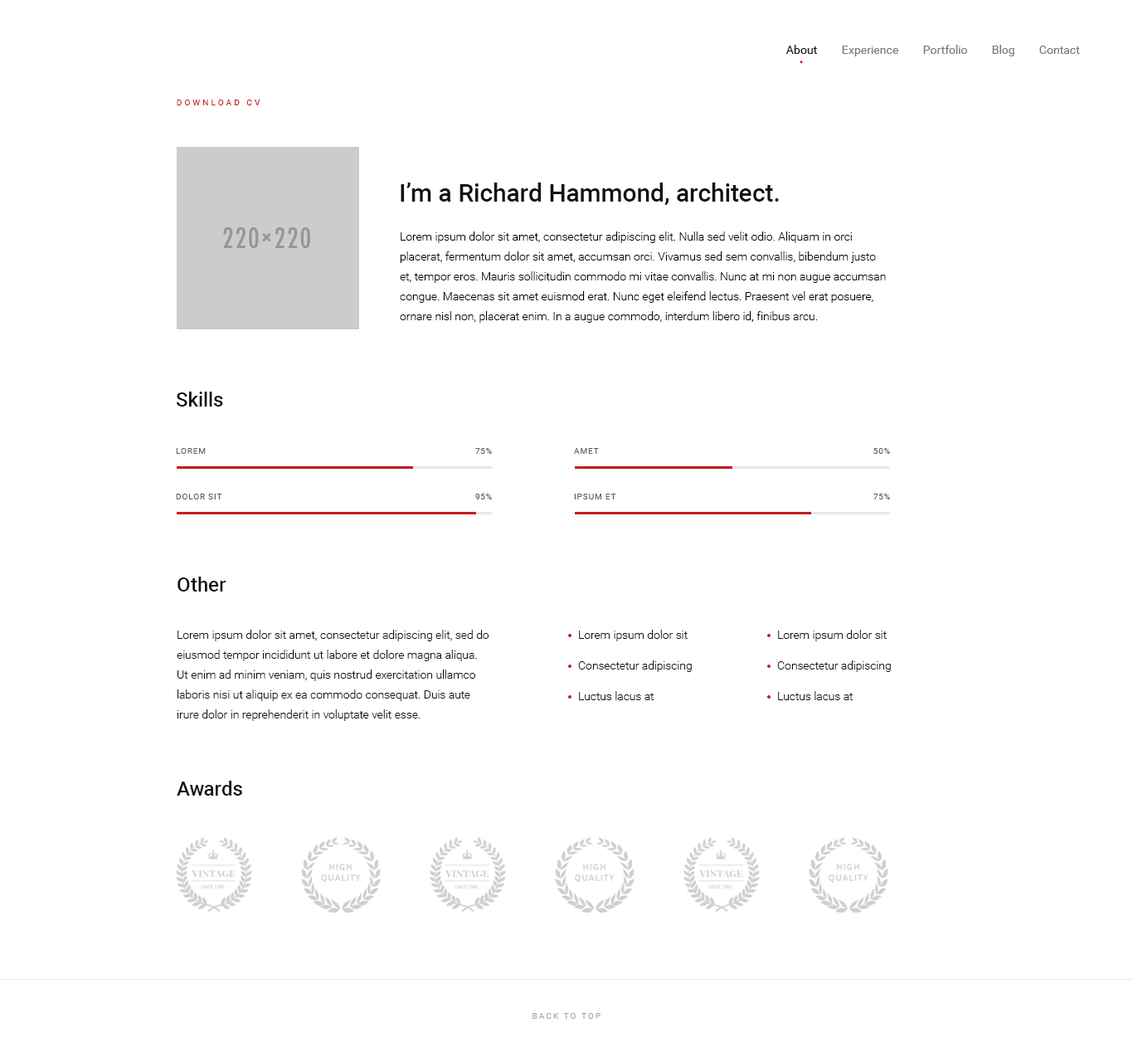
<style>
.page{position:relative;width:1133px;height:1052px;background:#ffffff}
.page>*{position:absolute;margin:0}
.t1{font:11.6px "Roboto-Regular";color:#111111}
.t2{font:11.6px "Roboto-Regular";color:#797979}
.t3{font:8.3px "Roboto-Regular";letter-spacing:0.3em;color:#c51d1d;text-transform:uppercase}
.t4{font:24.9px "Roboto-Medium";color:#111111}
.t5{font:11.6px/19.9px "Roboto-Light";color:#000000}
.t6{font:19.9px "Roboto-Medium";color:#111111}
.t7{font:8.3px "Roboto-Regular";letter-spacing:0.075em;color:#5e5e5e;text-transform:uppercase}
.t8{font:11.6px/19.9px "Roboto-Light";color:#111111}
.t9{font:11.6px "Roboto-Light";color:#111111}
.t10{font:8.3px "Roboto-Regular";letter-spacing:0.2em;color:#a6a6a6;text-transform:uppercase}
</style>
<div class="page">
<p class="t1" style="left:786px;top:45px;width:31px;height:9px">About</p>
<p class="t2" style="left:842px;top:46px;width:57px;height:10px">Experience</p>
<p class="t2" style="left:923px;top:45px;width:44px;height:9px">Portfolio</p>
<p class="t2" style="left:992px;top:45px;width:23px;height:11px">Blog</p>
<p class="t2" style="left:1040px;top:46px;width:40px;height:8px">Contact</p>
<p class="t3" style="left:177px;top:100px;width:84px;height:5px">download cv</p>
<p class="t4" style="left:401px;top:183px;width:378px;height:22px">I’m a Richard Hammond, architect.</p>
<p class="t5" style="left:400px;top:231px;width:486px;height:92px">Lorem ipsum dolor sit amet, consectetur adipiscing elit. Nulla sed velit odio. Aliquam in orci placerat, fermentum dolor sit amet, accumsan orci. Vivamus sed sem convallis, bibendum justo et, tempor eros. Mauris sollicitudin commodo mi vitae convallis. Nunc at mi non augue accumsan congue. Maecenas sit amet euismod erat. Nunc eget eleifend lectus. Praesent vel erat posuere, ornare nisl non, placerat enim. In a augue commodo, interdum libero id, finibus arcu.</p>
<p class="t6" style="left:176px;top:392px;width:47px;height:15px">Skills</p>
<p class="t7" style="left:176px;top:448px;width:30px;height:6px">lorem</p>
<p class="t7" style="left:475px;top:448px;width:17px;height:6px">75%</p>
<p class="t7" style="left:574px;top:448px;width:25px;height:6px">amet</p>
<p class="t7" style="left:874px;top:448px;width:16px;height:6px">50%</p>
<p class="t7" style="left:176px;top:494px;width:46px;height:5px">dolor sit</p>
<p class="t7" style="left:475px;top:494px;width:17px;height:5px">95%</p>
<p class="t7" style="left:574px;top:494px;width:42px;height:5px">ipsum et</p>
<p class="t7" style="left:874px;top:494px;width:16px;height:5px">75%</p>
<p class="t6" style="left:178px;top:577px;width:49px;height:15px">Other</p>
<p class="t8" style="left:177px;top:630px;width:313px;height:91px">Lorem ipsum dolor sit amet, consectetur adipiscing elit, sed do eiusmod tempor incididunt ut labore et dolore magna aliqua. Ut enim ad minim veniam, quis nostrud exercitation ullamco laboris nisi ut aliquip ex ea commodo consequat. Duis aute irure dolor in reprehenderit in voluptate velit esse.</p>
<p class="t9" style="left:579px;top:630px;width:109px;height:11px">Lorem ipsum dolor sit</p>
<p class="t9" style="left:778px;top:630px;width:109px;height:11px">Lorem ipsum dolor sit</p>
<p class="t9" style="left:578px;top:660px;width:114px;height:12px">Consectetur adipiscing</p>
<p class="t9" style="left:777px;top:660px;width:114px;height:12px">Consectetur adipiscing</p>
<p class="t9" style="left:579px;top:691px;width:76px;height:9px">Luctus lacus at</p>
<p class="t9" style="left:778px;top:691px;width:76px;height:9px">Luctus lacus at</p>
<p class="t6" style="left:177px;top:781px;width:65px;height:15px">Awards</p>
<p class="t10" style="left:533px;top:1013px;width:68px;height:6px">back to top</p>
</div>
